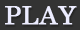
<style>
.page{position:relative;width:80px;height:30px;background:#333333}
.page>*{position:absolute;margin:0}
.t1{font:25px "Century";letter-spacing:0.01em;color:#ececff;font-weight:bold}
</style>
<div class="page">
<p class="t1" style="left:5px;top:6px;width:72px;height:19px">PLAY</p>
</div>
